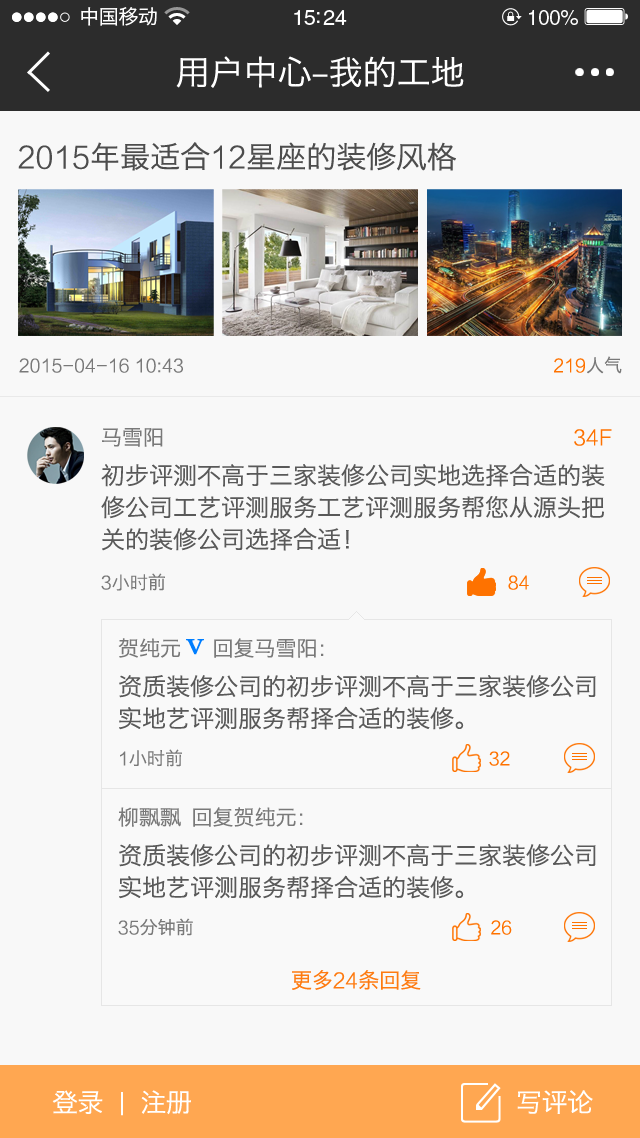
<style>
.page{position:relative;width:640px;height:1138px;background:#f8f8f8}
.page>*{position:absolute;margin:0}
.t1{font:20px "HiraginoSansGB-W3";letter-spacing:-0.02em;color:#ffffff}
.t2{font:21.5px "HelveticaLTStd-Roman";letter-spacing:-0.02em;color:#ffffff}
.t3{font:20.6px "HelveticaLTStd-Roman";letter-spacing:-0.02em;color:#ffffff}
.t4{font:34px "HiraginoSansGB-W3";color:#ffffff}
.t5{font:30px "HiraginoSansGB-W3";color:#4d4d4d}
.t6{font:30px "FZLTXHK";color:#4d4d4d}
.t7{font:18px "FZLTXHK";color:#797979}
.t8{font:18px "FZLTXHK";color:#fe7200}
.t9{font:18px "HiraginoSansGB-W3";color:#797979}
.t10{font:21px "HiraginoSansGB-W3";color:#797979}
.t11{font:21px "FZLTXHK";color:#fe7200}
.t12{font:24px/32px "HiraginoSansGB-W3";color:#595959}
.t13{font:24px "Ò¶¸ùÓÑÃ«±ÊÐÐÊé¼òÌå";color:#007eff}
.t14{font:21px "HiraginoSansGB-W3";color:#fe7b11}
.t15{font:21px "FZLTXHK";color:#fe7b11}
.t16{font:26px "HiraginoSansGB-W3";letter-spacing:-0.02em;color:#ffffff}
</style>
<div class="page">
<p class="t1" style="left:81px;top:7px;width:76px;height:19px">中国移动</p>
<p class="t2" style="left:294px;top:10px;width:53px;height:15px">15:24</p>
<p class="t3" style="left:529px;top:10px;width:49px;height:15px">100%</p>
<p class="t4" style="left:176px;top:56px;width:288px;height:32px">用户中心-我的工地</p>
<p class="t5" style="left:18px;top:142px;width:438px;height:29px"><span class="t6">2015</span>年最适合<span class="t6">12</span>星座的装修风格</p>
<p class="t7" style="left:19px;top:356px;width:603px;height:18px">2015-04-16 10:43                                                                          <span class="t8">219</span><span class="t9">人气</span></p>
<p class="t10" style="left:102px;top:428px;width:510px;height:19px">马雪阳                                       <span class="t11">34F</span></p>
<p class="t12" style="left:101px;top:463px;width:504px;height:88px">初步评测不高于三家装修公司实地选择合适的装修公司工艺评测服务工艺评测服务帮您从源头把关的装修公司选择合适！</p>
<p class="t7" style="left:101px;top:573px;width:428px;height:18px">3小时<span class="t9">前                                      </span><span class="t8">84</span></p>
<p class="t10" style="left:118px;top:638px;width:206px;height:20px">贺纯元   回复马雪阳：</p>
<p class="t13" style="left:186px;top:639px;width:18px;height:16px">V</p>
<p class="t12" style="left:119px;top:675px;width:477px;height:55px">资质装修公司的初步评测不高于三家装修公司实地艺评测服务帮择合适的装修。</p>
<p class="t9" style="left:120px;top:749px;width:390px;height:18px"><span class="t7">1</span>小时前                                  <span class="t8">32</span></p>
<p class="t10" style="left:118px;top:807px;width:185px;height:20px">柳飘飘 回复贺纯元：</p>
<p class="t12" style="left:119px;top:844px;width:477px;height:55px">资质装修公司的初步评测不高于三家装修公司实地艺评测服务帮择合适的装修。</p>
<p class="t9" style="left:118px;top:918px;width:394px;height:18px"><span class="t7">35</span>分钟前                                 <span class="t8">26</span></p>
<p class="t14" style="left:292px;top:970px;width:129px;height:20px">更多<span class="t15">24</span>条回复</p>
<p class="t16" style="left:52px;top:1090px;width:139px;height:26px">登录 | 注册</p>
<p class="t16" style="left:517px;top:1090px;width:76px;height:24px">写评论</p>
</div>
